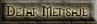
<style>
.page{position:relative;width:97px;height:24px}
.page>*{position:absolute;margin:0}
.t1{font:13.3px "Morpheus"}
</style>
<div class="page">
<p class="t1" style="left:6px;top:6px;width:83px;height:13px">Dejar Mensaje</p>
</div>
